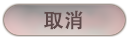
<style>
.page{position:relative;width:130px;height:40px;background:#ffffff}
.page>*{position:absolute;margin:0}
.t1{font:20px "AdobeHeitiStd-Regular";color:#5e4a4a;font-weight:bold}
</style>
<div class="page">
<p class="t1" style="left:44px;top:10px;width:39px;height:20px">取消</p>
</div>
